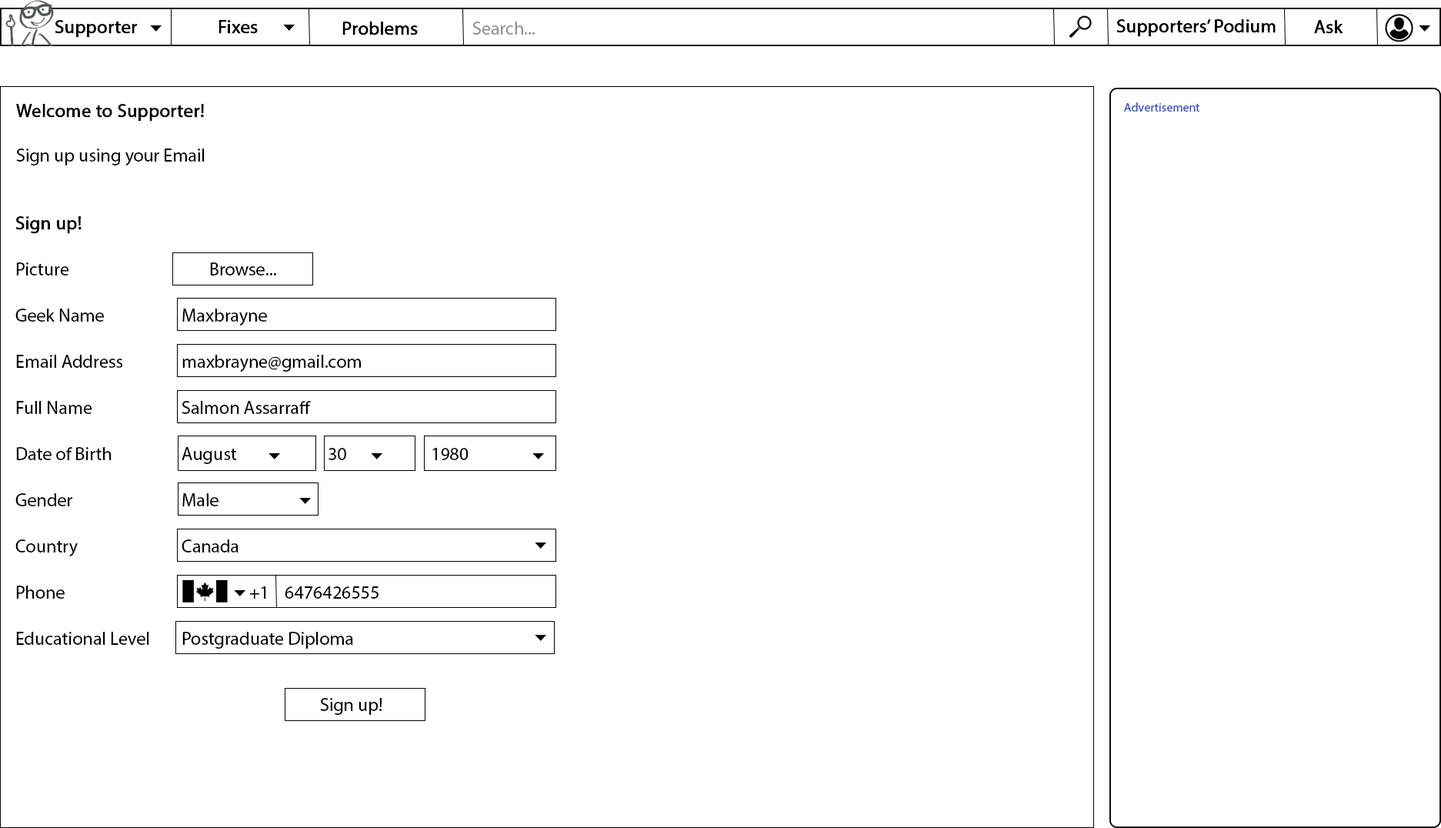
<style>
.page{position:relative;width:1441px;height:828px;background:#ffffff}
.page>*{position:absolute;margin:0}
.t1{font:18.5px "MyriadPro-Regular";color:#000000;font-weight:bold}
.t2{font:18.5px "MyriadPro-Regular";color:#919090}
.t3{font:18.5px "MyriadPro-Regular";color:#010000;font-weight:bold}
.t4{font:18.5px "MyriadPro-Regular";color:#000000}
.t5{font:12.3px "MyriadPro-Regular";color:#2d4fc9}
.t6{font:18.5px/46.2px "MyriadPro-Regular";color:#000000}
</style>
<div class="page">
<p class="t1" style="left:55px;top:20px;width:83px;height:18px">Supporter</p>
<p class="t1" style="left:218px;top:20px;width:40px;height:14px">Fixes</p>
<p class="t1" style="left:342px;top:22px;width:76px;height:13px">Problems</p>
<p class="t2" style="left:472px;top:22px;width:63px;height:13px">Search...</p>
<p class="t3" style="left:1116px;top:19px;width:159px;height:18px">Supporters’ Podium</p>
<p class="t1" style="left:1314px;top:20px;width:29px;height:14px">Ask</p>
<p class="t4" style="left:16px;top:104px;width:189px;height:61px"><span class="t1">Welcome to Supporter!<br><br></span>Sign up using your Email</p>
<p class="t5" style="left:1124px;top:102px;width:75px;height:10px">Advertisement</p>
<p class="t6" style="left:15px;top:216px;width:453px;height:499px"><span class="t1">Sign up!<br></span>Picture      Browse...<br>Geek Name   Maxbrayne<br>Email Address   maxbrayne@gmail.com<br>Full Name    Salmon Assarraff<br>Date of Birth   August      30    1980<br>Gender    Male<br>Country    Canada<br>Phone             +1    6476426555<br>Educational Level  Postgraduate Diploma<br><span class="t4"><br><br>           Sign up!</span></p>
</div>
